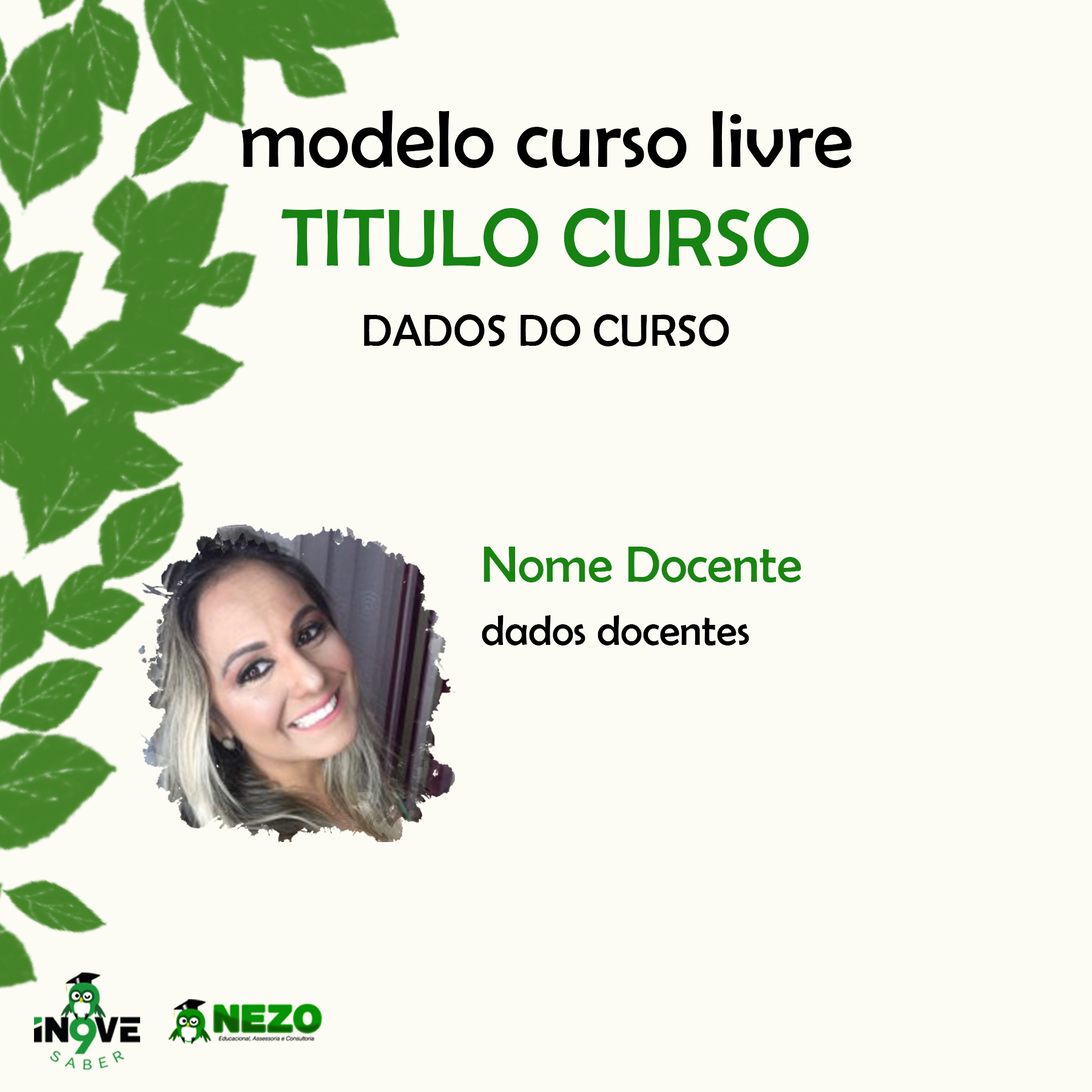
<style>
.page{position:relative;width:1092px;height:1092px;background:#fcfcf5}
.page>*{position:absolute;margin:0}
.t1{font:82.2px "BerlinSansFB-Reg";color:#000000}
.t2{font:82.2px "BerlinSansFB-Reg";color:#168313}
.t3{font:45.2px "BerlinSansFB-Reg";color:#000000}
.t4{font:42.5px/63.1px "BerlinSansFB-Reg";color:#000000}
.t5{font:51.6px "BerlinSansFB-Reg";color:#198511}
</style>
<div class="page">
<p class="t1" style="left:241px;top:110px;width:611px;height:157px;text-align:center">modelo curso livre<br><span class="t2">TITULO CURSO</span></p>
<p class="t3" style="left:364px;top:314px;width:365px;height:32px">DADOS DO CURSO</p>
<p class="t4" style="left:482px;top:547px;width:319px;height:98px"><span class="t5">Nome Docente<br></span>dados docentes</p>
</div>
